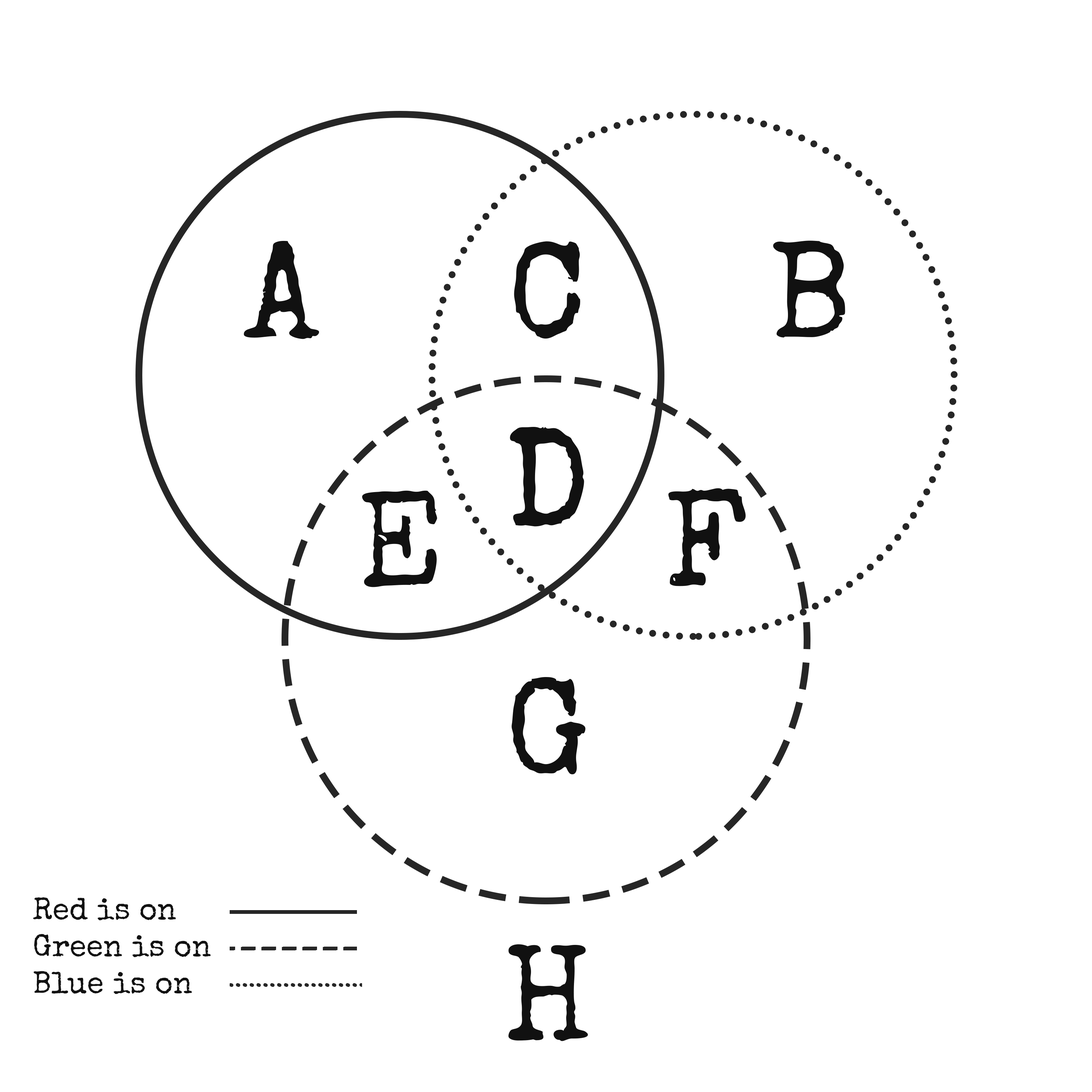
<style>
.page{position:relative;width:1092px;height:1092px;background:#ffffff}
.page>*{position:absolute;margin:0}
.t1{font:136.5px "SpecialElite-Regular";color:#111111}
.t2{font:30.7px "SpecialElite-Regular";color:#111111}
</style>
<div class="page">
<p class="t1" style="left:244px;top:241px;width:75px;height:98px">A</p>
<p class="t1" style="left:514px;top:241px;width:66px;height:98px">C</p>
<p class="t1" style="left:773px;top:241px;width:72px;height:96px">B</p>
<p class="t1" style="left:510px;top:427px;width:74px;height:100px">D</p>
<p class="t1" style="left:362px;top:490px;width:75px;height:97px">E</p>
<p class="t1" style="left:668px;top:488px;width:78px;height:98px">F</p>
<p class="t1" style="left:512px;top:677px;width:74px;height:97px">G</p>
<p class="t2" style="left:33px;top:897px;width:178px;height:97px">Red is on<br>Green is on<br>Blue is on</p>
<p class="t1" style="left:508px;top:944px;width:80px;height:97px">H</p>
</div>
